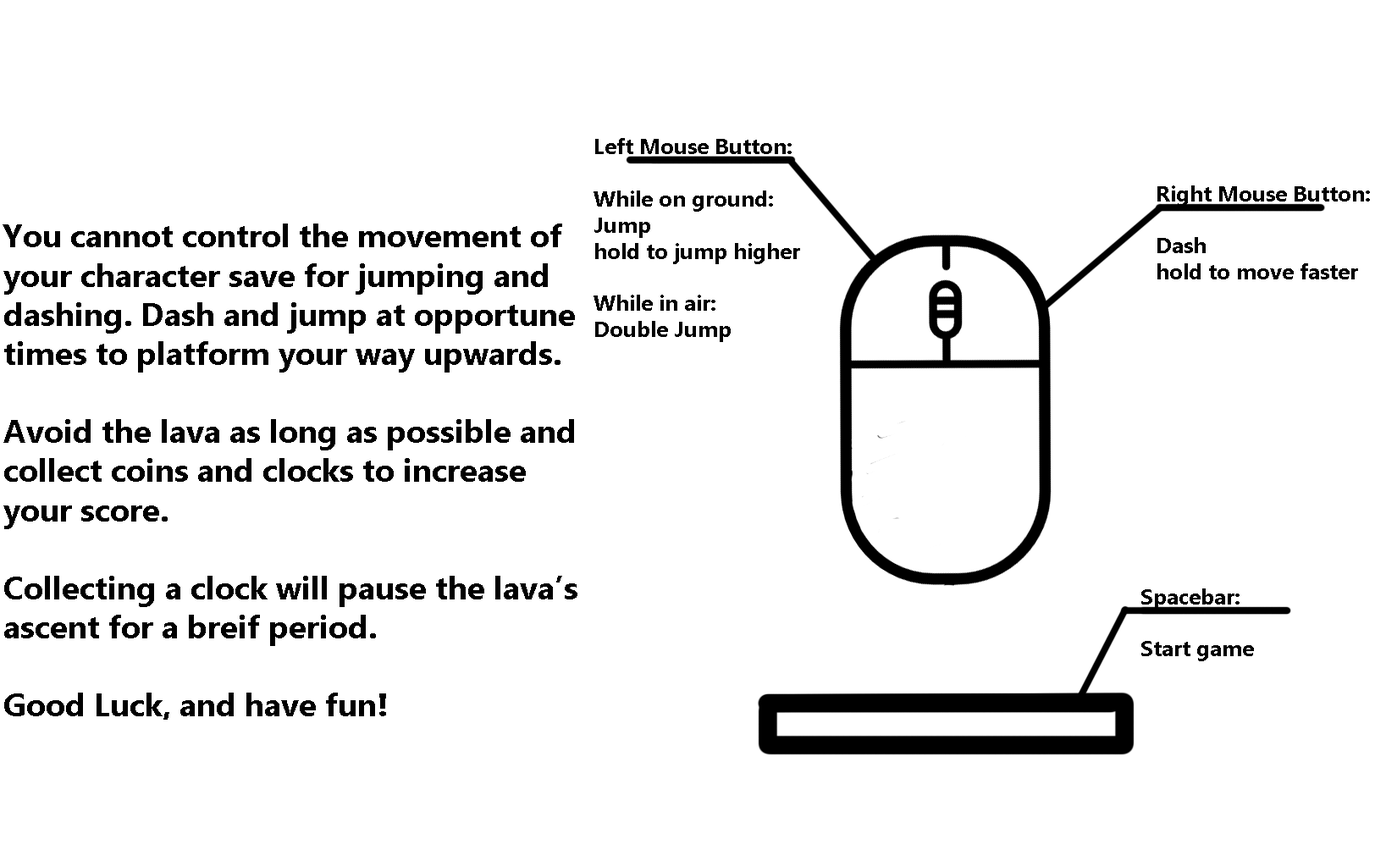
<style>
.page{position:relative;width:1375px;height:867px;background:#ffffff}
.page>*{position:absolute;margin:0}
.t1{font:21.7px "Ebrima-Bold";color:#000000}
.t2{font:10.2px "Ebrima-Bold";color:#000000}
.t3{font:32.6px "Ebrima-Bold";color:#000000}
</style>
<div class="page">
<p class="t1" style="left:594px;top:138px;width:206px;height:204px">Left Mouse Button:<br><br>While on ground:<br>Jump <br>hold to jump higher<br><br>While in air:<br>Double Jump</p>
<p class="t2" style="left:1158px;top:185px;width:212px;height:94px">Right Mouse Button:<br><br>Dash<br>hold to move faster</p>
<p class="t3" style="left:3px;top:224px;width:575px;height:496px">You cannot control the movement of <br>your character save for jumping and <br>dashing. Dash and jump at opportune <br>times to platform your way upwards.<br><br>Avoid the lava as long as possible and<br>collect coins and clocks to increase <br>your score.<br><br>Collecting a clock will pause the lava’s<br>ascent for a breif period.<br><br>Good Luck, and have fun!</p>
<p class="t2" style="left:1141px;top:589px;width:113px;height:72px">Spacebar:<br><br>Start game</p>
</div>
